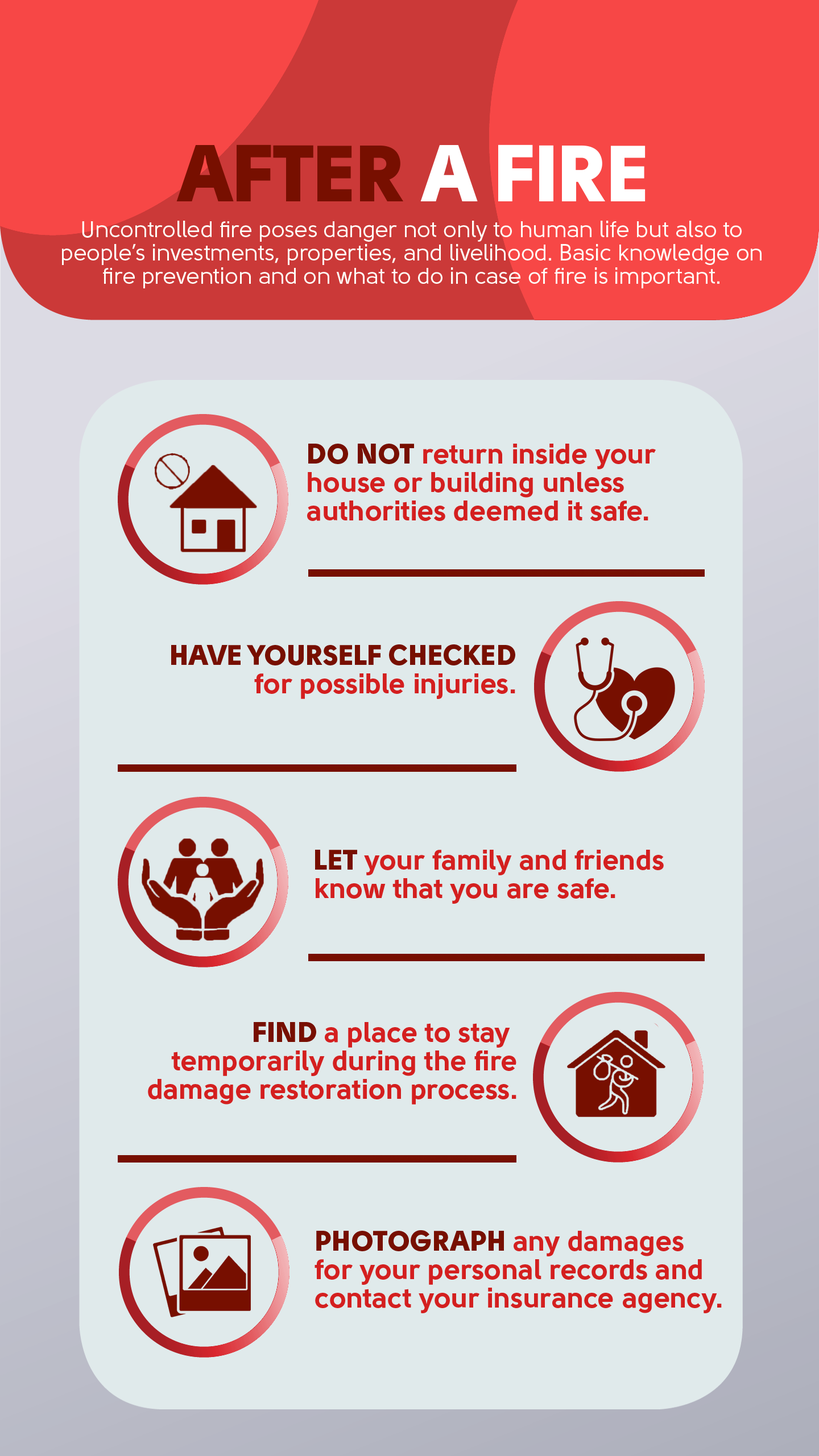
<style>
.page{position:relative;width:819px;height:1456px;background:#e0eaeb}
.page>*{position:absolute;margin:0}
.t1{font:79.6px "Solomon-Sans-Black";color:#ffffff}
.t2{font:79.6px "Solomon-Sans-Black";color:#770f00}
.t3{font:22.7px/23.3px "Solomon-Sans-Normal";color:#fffef8}
.t4{font:28.4px/28.4px "Solomon-Sans-Bold";color:#d41f1f}
.t5{font:28.4px/28.4px "Solomon-Sans-Black";color:#770f00}
</style>
<div class="page">
<p class="t1" style="left:176px;top:144px;width:470px;height:57px"><span class="t2">AFTER</span> A FIRE</p>
<p class="t3" style="left:62px;top:221px;width:700px;height:67px;text-align:center">Uncontrolled fire poses danger not only to human life but also to<br>people’s investments, properties, and livelihood. Basic knowledge on<br>fire prevention and on what to do in case of fire is important.</p>
<p class="t4" style="left:307px;top:444px;width:349px;height:77px"><span class="t5">DO NOT </span>return inside your<br>house or building unless<br>authorities deemed it safe.</p>
<p class="t4" style="left:171px;top:644px;width:344px;height:55px;text-align:right"><span class="t5">HAVE YOURSELF CHECKED<br></span>for possible injuries.</p>
<p class="t4" style="left:315px;top:850px;width:349px;height:54px"><span class="t5">LET </span>your family and friends<br>know that you are safe.</p>
<p class="t4" style="left:148px;top:1022px;width:368px;height:82px;text-align:right"><span class="t5">FIND </span>a place to stay <br>temporarily during the fire<br>damage restoration process.</p>
<p class="t4" style="left:315px;top:1230px;width:407px;height:83px"><span class="t5">PHOTOGRAPH </span>any damages<br>for your personal records and<br>contact your insurance agency.</p>
</div>
